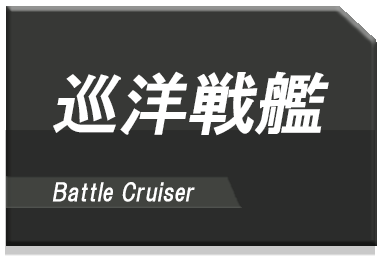
<style>
.page{position:relative;width:384px;height:256px;background:#373836}
.page>*{position:absolute;margin:0}
.t1{font:68px "HGPGothicE";color:#ffffff;font-style:italic}
.t2{font:24px "HGPGothicE";color:#ffffff;font-style:italic}
</style>
<div class="page">
<p class="t1" style="left:53px;top:71px;width:276px;height:65px">巡洋戦艦</p>
<p class="t2" style="left:52px;top:182px;width:143px;height:20px">Battle Cruiser</p>
</div>
